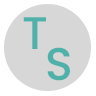
<style>
.page{position:relative;width:96px;height:96px;background:#d7d7d7}
.page>*{position:absolute;margin:0}
.t1{font:45.8px "Poppins-Medium";color:#4fb2aa}
</style>
<div class="page">
<p class="t1" style="left:23px;top:17px;width:23px;height:32px">T</p>
<p class="t1" style="left:47px;top:47px;width:23px;height:34px">S</p>
</div>
